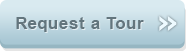
<style>
.page{position:relative;width:186px;height:51px}
.page>*{position:absolute;margin:0}
.t1{font:17px "Arial-BoldMT";letter-spacing:0.04em;color:#63757d}
.t2{font:30.6px "Tahoma-Bold";color:#edfaff}
</style>
<div class="page">
<p class="t1" style="left:16px;top:17px;width:128px;height:15px">Request a Tour</p>
<p class="t2" style="left:159px;top:16px;width:18px;height:15px">»</p>
</div>
